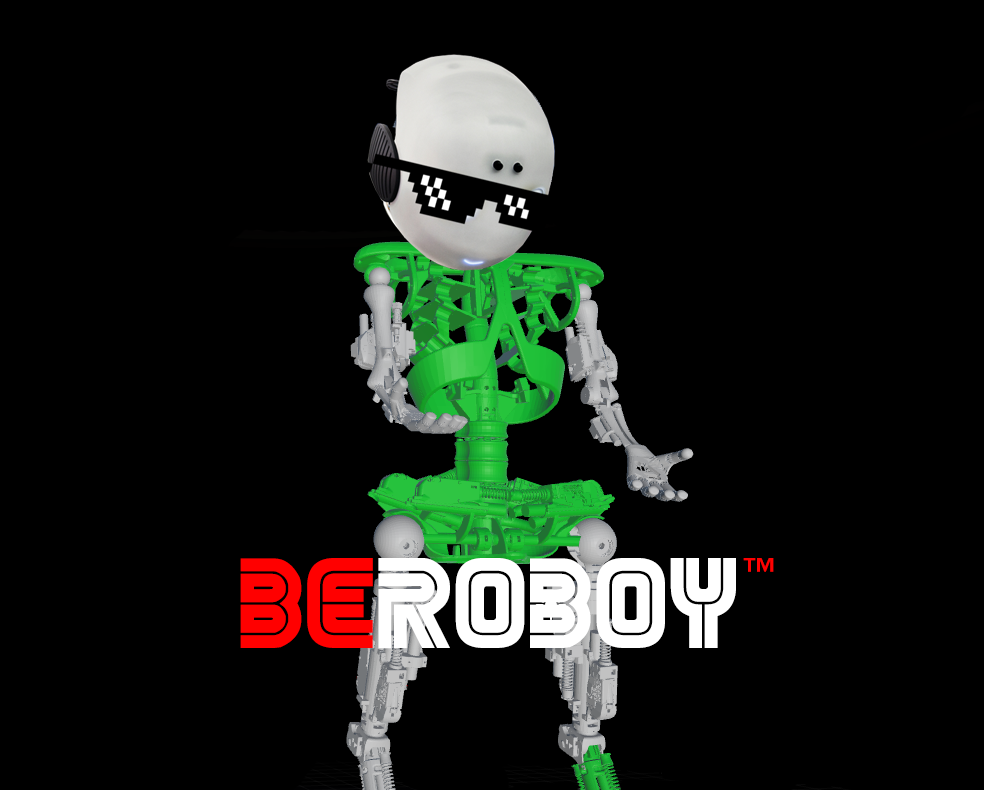
<style>
.page{position:relative;width:984px;height:790px;background:#000000}
.page>*{position:absolute;margin:0}
.t1{font:105.6px "MrRobot";color:#ffffff}
.t2{font:105.6px "MrRobot";color:#ff0000}
.t3{font:33.4px "CenturyGothic-Bold";color:#ff0101}
</style>
<div class="page">
<p class="t1" style="left:240px;top:558px;width:496px;height:91px"><span class="t2">BE</span>ROBOY</p>
<p class="t3" style="left:743px;top:558px;width:31px;height:14px">™</p>
</div>
